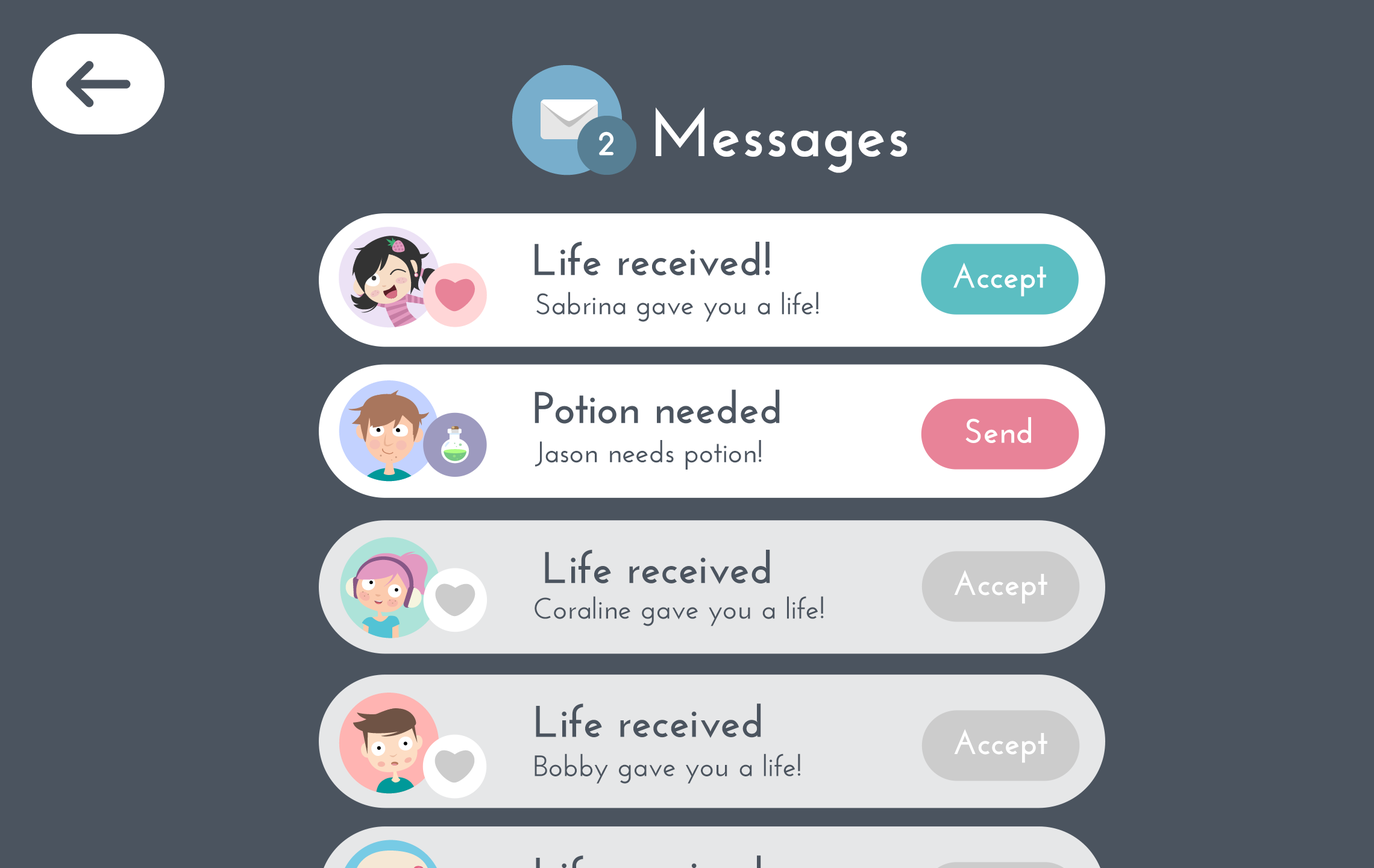
<style>
.page{position:relative;width:1374px;height:868px;background:#4b545f}
.page>*{position:absolute;margin:0}
.t1{font:66.3px "JosefinSans-Bold";color:#ffffff}
.t2{font:34.1px "JosefinSans-Bold";color:#ffffff}
.t3{font:44.4px "JosefinSans-Bold";color:#4b545f}
.t4{font:29.6px "JosefinSans-SemiBold";color:#4b545f}
</style>
<div class="page">
<p class="t1" style="left:656px;top:107px;width:252px;height:66px">Messages</p>
<p class="t2" style="left:953px;top:262px;width:93px;height:35px">Accept</p>
<p class="t2" style="left:965px;top:417px;width:66px;height:26px">Send</p>
<p class="t3" style="left:545px;top:550px;width:225px;height:34px">Life received</p>
<p class="t2" style="left:954px;top:570px;width:93px;height:34px">Accept</p>
<p class="t4" style="left:535px;top:596px;width:289px;height:30px">Coraline gave you a life!</p>
<p class="t3" style="left:536px;top:703px;width:225px;height:35px">Life received</p>
<p class="t2" style="left:954px;top:729px;width:93px;height:34px">Accept</p>
<p class="t4" style="left:535px;top:753px;width:265px;height:30px">Bobby gave you a life!</p>
</div>
